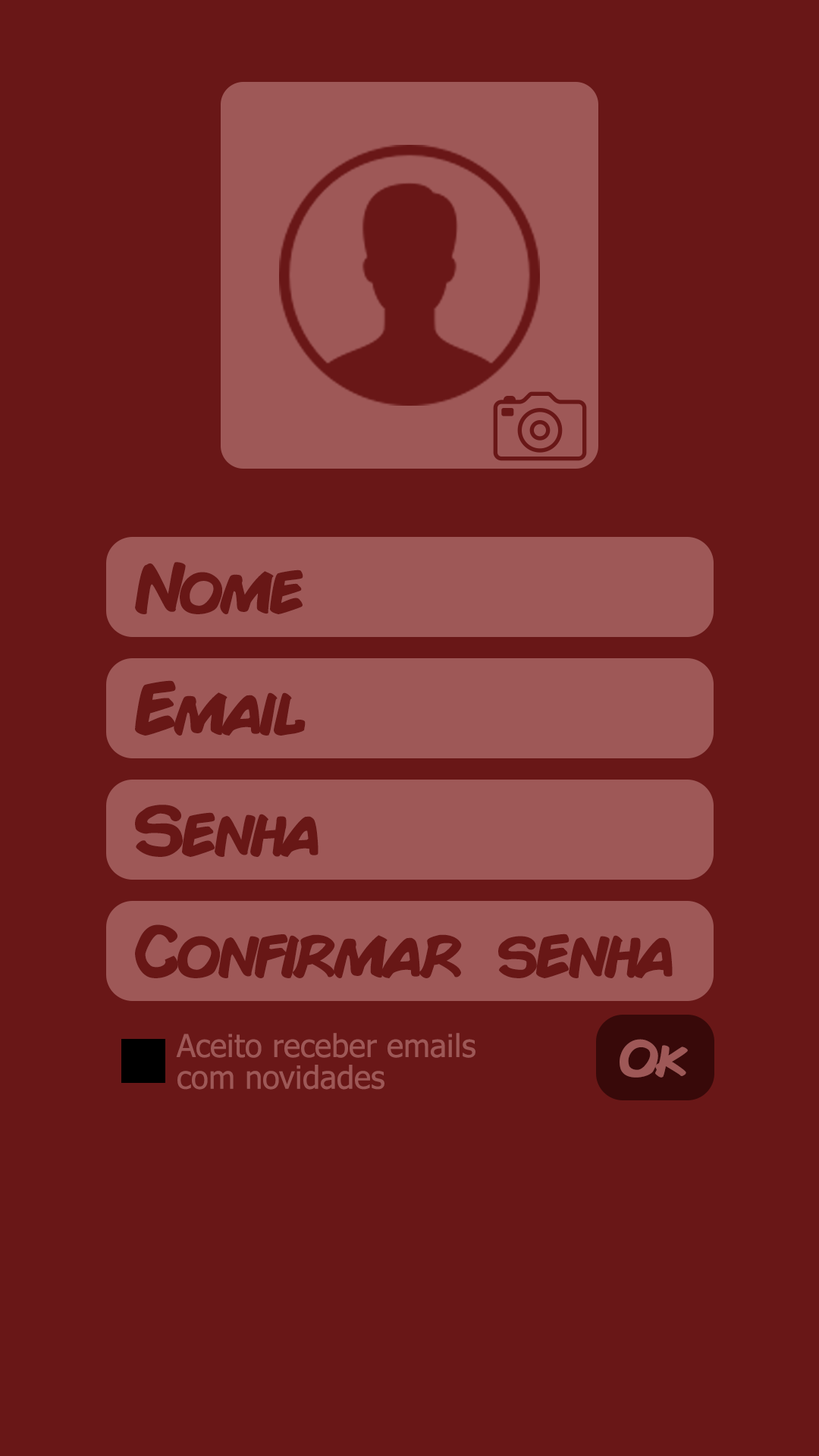
<style>
.page{position:relative;width:819px;height:1456px;background:#691717}
.page>*{position:absolute;margin:0}
.t1{font:69.5px "ComicBook-Bold";color:#681716}
.t2{font:31.6px/31.6px "Tahoma";color:#9e5857}
.t3{font:50.6px "ComicBook-Bold";color:#9e5857}
</style>
<div class="page">
<p class="t1" style="left:135px;top:562px;width:168px;height:52px">Nome</p>
<p class="t1" style="left:135px;top:680px;width:171px;height:56px">Email</p>
<p class="t1" style="left:135px;top:805px;width:183px;height:52px">Senha</p>
<p class="t1" style="left:135px;top:924px;width:538px;height:54px">Confirmar senha</p>
<p class="t2" style="left:176px;top:1033px;width:299px;height:57px">Aceito receber emails <br>com novidades</p>
<p class="t3" style="left:620px;top:1039px;width:68px;height:39px">Ok</p>
</div>
